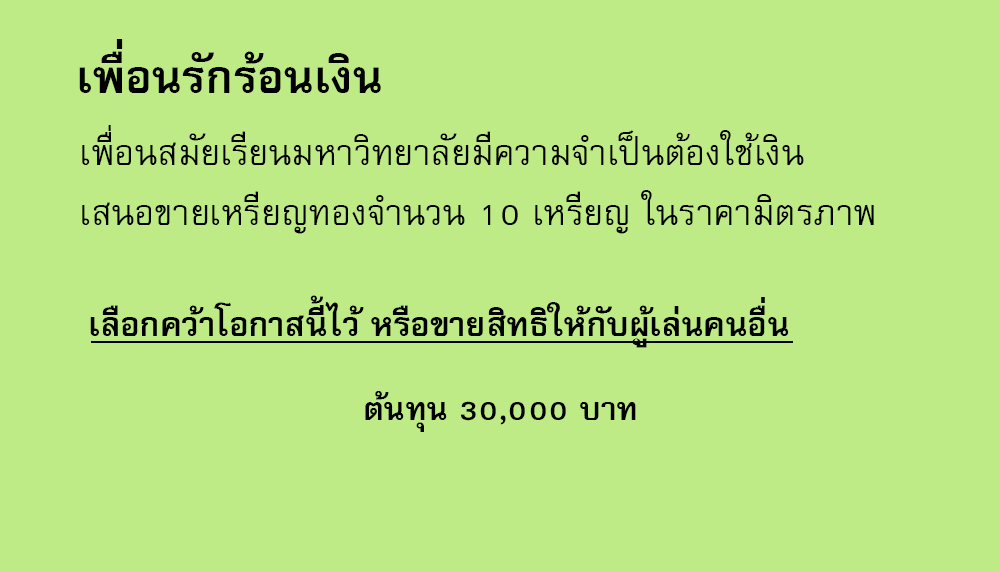
<style>
.page{position:relative;width:1000px;height:572px;background:#beeb85}
.page>*{position:absolute;margin:0}
.t1{font:64px "FreesiaUPCBold";color:#000000}
.t2{font:50px/60px "FreesiaUPC";color:#000000}
.t3{font:47px "FreesiaUPCBold";color:#000000}
.t4{font:45px "FreesiaUPCBold";color:#000000}
</style>
<div class="page">
<p class="t1" style="left:79px;top:39px;width:302px;height:54px">เพื่อนรักร้อนเงิน</p>
<p class="t2" style="left:82px;top:125px;width:792px;height:109px">เพื่อนสมัยเรียนมหาวิทยาลัยมีความจำเป็นต้องใช้เงิน<br>เสนอขายเหรียญทองจำนวน 10 เหรียญ ในราคามิตรภาพ</p>
<p class="t3" style="left:90px;top:295px;width:699px;height:53px">เลือกคว้าโอกาสนี้ไว้ หรือขายสิทธิให้กับผู้เล่นคนอื่น</p>
<p class="t4" style="left:365px;top:391px;width:271px;height:41px">ต้นทุน 30,000 บาท</p>
</div>
